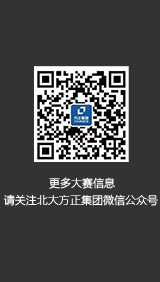
<style>
.page{position:relative;width:160px;height:282px;background:#333333}
.page>*{position:absolute;margin:0}
.t1{font:11px "MicrosoftYaHeiLight";color:#ffffff}
</style>
<div class="page">
<p class="t1" style="left:49px;top:177px;width:66px;height:12px">更多大赛信息</p>
<p class="t1" style="left:3px;top:194px;width:155px;height:12px">请关注北大方正集团微信公众号</p>
</div>
